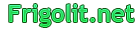
<style>
.page{position:relative;width:140px;height:31px;background:#ffffff}
.page>*{position:absolute;margin:0}
.t1{font:24px "TrebuchetMS-Bold"}
</style>
<div class="page">
<p class="t1" style="left:9px;top:4px;width:125px;height:23px">Frigolit.net</p>
</div>
